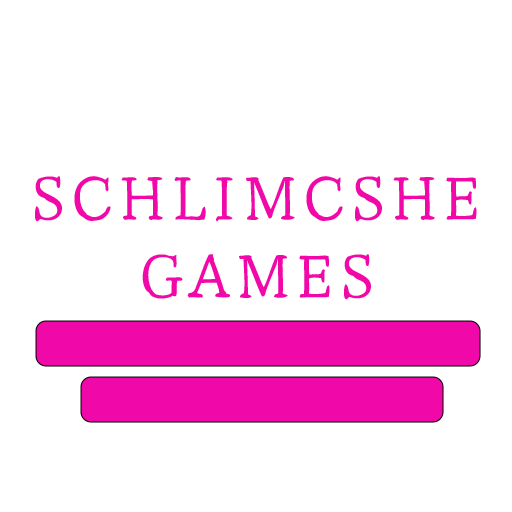
<style>
.page{position:relative;width:512px;height:512px;background:#ffffff}
.page>*{position:absolute;margin:0}
.t1{font:65px "YujiSyuku-Regular";color:#f008a8}
</style>
<div class="page">
<p class="t1" style="left:35px;top:176px;width:442px;height:124px;text-align:justify">SCHLIMCSHE GAMES</p>
</div>
